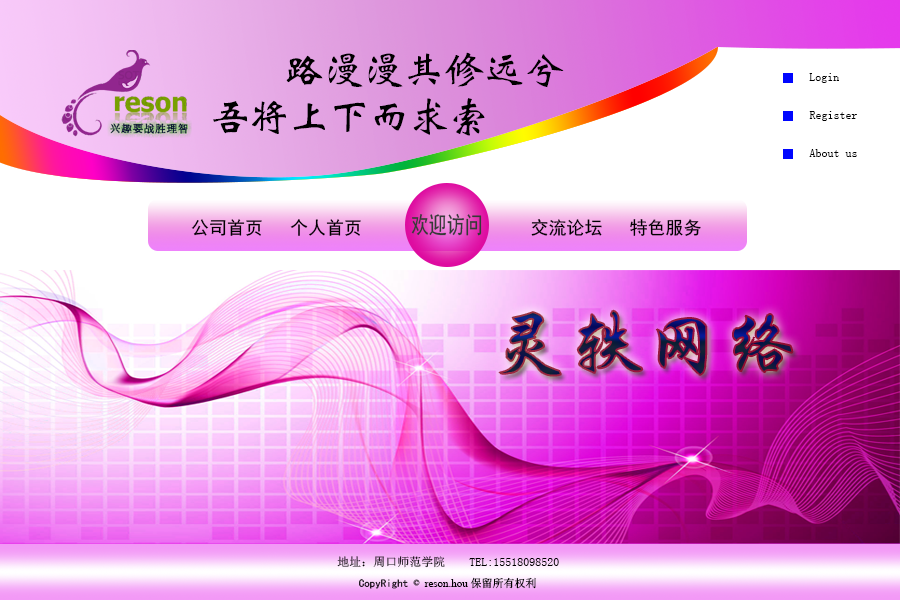
<style>
.page{position:relative;width:900px;height:600px}
.page>*{position:absolute;margin:0}
.t1{font:40px "CTWeiBeiSJ";color:#000000}
.t2{font:12px "SimSun";color:#000000}
.t3{font:18px "SimHei";color:#000000}
.t4{font:23.2px "SimHei";color:#343b37;scale:0.78 1}
.t5{font:77px "CTXingKaiSJ"}
.t6{font:11px "SimHei";color:#000000}
.t7{font:11px "SimSun";color:#000000}
.t8{font:11px "TimesNewRomanPSMT";color:#000000}
</style>
<div class="page">
<p class="t1" style="left:286px;top:52px;width:278px;height:36px">路漫漫其修远兮</p>
<p class="t2" style="left:809px;top:73px;width:30px;height:10px">Login</p>
<p class="t1" style="left:213px;top:98px;width:272px;height:38px">吾将上下而求索</p>
<p class="t2" style="left:809px;top:111px;width:48px;height:10px">Register</p>
<p class="t2" style="left:809px;top:149px;width:48px;height:8px">About us</p>
<p class="t3" style="left:191px;top:219px;width:170px;height:17px">公司首页   个人首页</p>
<p class="t4" style="left:411px;top:213px;width:71px;height:23px">欢迎访问</p>
<p class="t3" style="left:531px;top:219px;width:170px;height:17px">交流论坛   特色服务</p>
<p class="t5" style="left:499px;top:310px;width:294px;height:66px">灵轶网络</p>
<p class="t2" style="left:337px;top:556px;width:222px;height:12px">地址：周口师范学院　　TEL:15518098520</p>
<p class="t6" style="left:359px;top:577px;width:177px;height:12px">CopyRight <span class="t7">© </span><span class="t8">reson.hou </span><span class="t7">保留所有权利</span></p>
</div>
